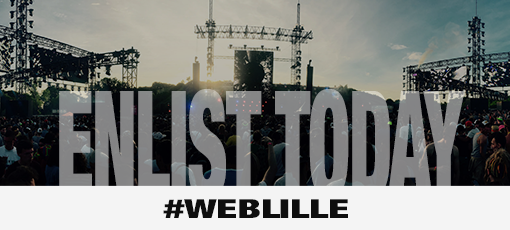
<style>
.page{position:relative;width:510px;height:230px}
.page>*{position:absolute;margin:0}
.t1{font:147.1px "HelveticaNeue-CondensedBlack";letter-spacing:-0.02em;color:#858686;text-transform:uppercase;scale:0.51 1}
.t2{font:26.3px "HelveticaNeue-CondensedBlack";letter-spacing:-0.01em;color:#0e0e0e;text-transform:uppercase;scale:1.59 1}
</style>
<div class="page">
<p class="t1" style="left:59px;top:89px;width:406px;height:109px">enlist today</p>
<p class="t2" style="left:163px;top:199px;width:185px;height:19px">#weblille</p>
</div>
